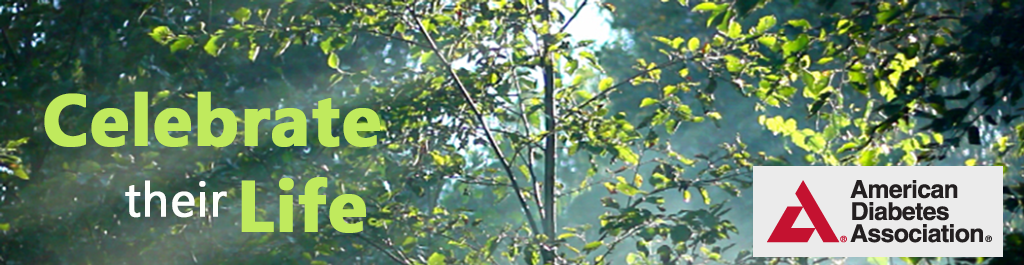
<style>
.page{position:relative;width:1024px;height:265px}
.page>*{position:absolute;margin:0}
.t1{font:72px "MyanmarText-Bold";color:#c0ea5d;font-weight:bold}
.t2{font:48px "MyanmarText";color:#fdfefc;font-weight:bold}
</style>
<div class="page">
<p class="t1" style="left:44px;top:91px;width:336px;height:142px;text-align:center">Celebrate<br>       <span class="t2">their </span>Life</p>
</div>
